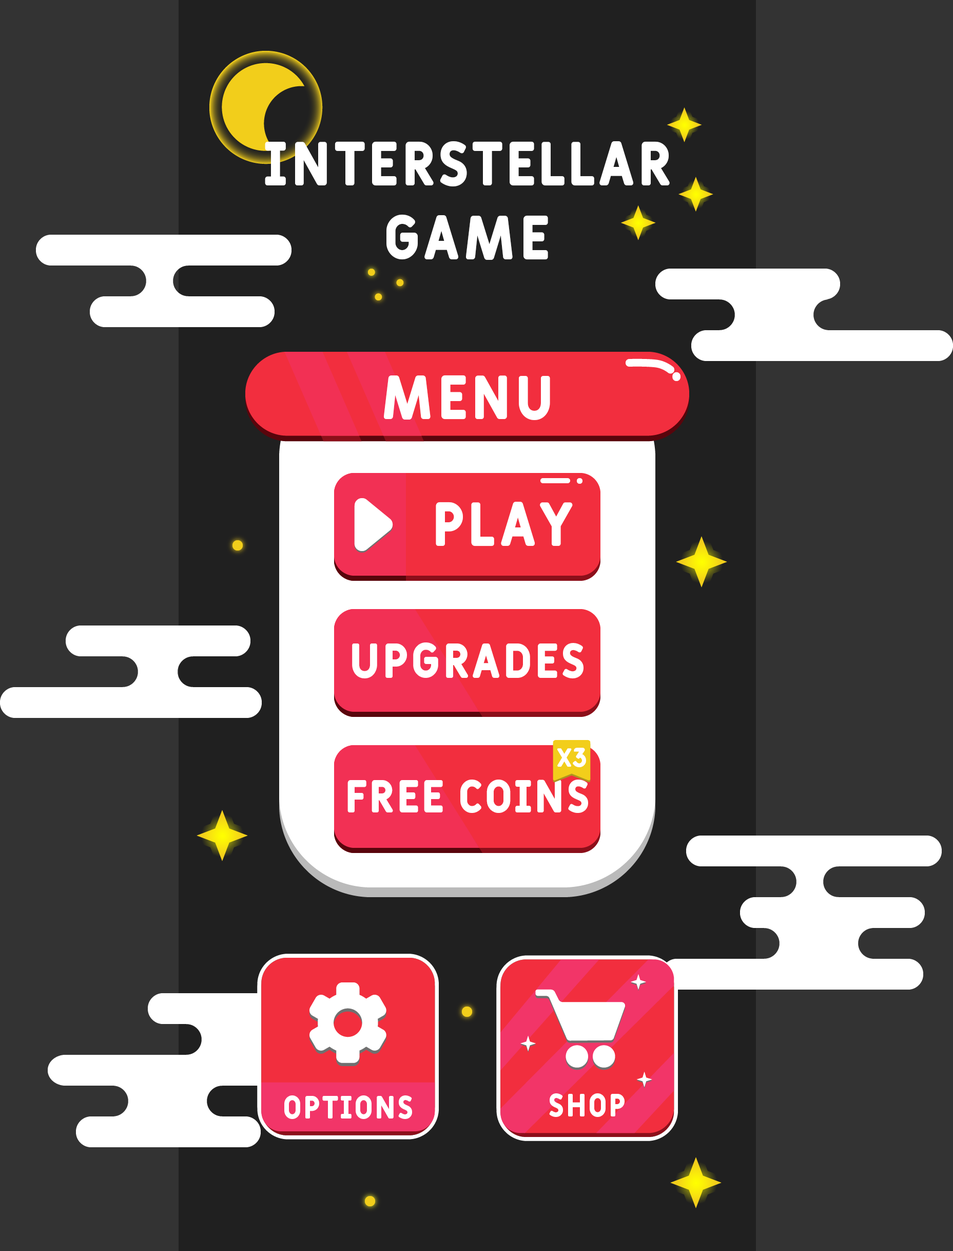
<style>
.page{position:relative;width:953px;height:1251px;background:#333333}
.page>*{position:absolute;margin:0}
.t1{font:61.6px "Fulbo-Premier";color:#ffffff}
.t2{font:61.6px "Fulbo-Argenta";color:#ffffff}
.t3{font:48.8px "Fulbo-Argenta";color:#ffffff}
.t4{font:26.1px "Fulbo-Argenta";color:#ffffff}
.t5{font:46.2px "Fulbo-Argenta";color:#ffffff}
.t6{font:32px "Fulbo-Argenta";color:#ffffff}
</style>
<div class="page">
<p class="t1" style="left:265px;top:141px;width:405px;height:119px;text-align:center">Interstellar<br>game</p>
<p class="t2" style="left:384px;top:375px;width:166px;height:45px">Menu</p>
<p class="t2" style="left:436px;top:502px;width:137px;height:44px">PLAY</p>
<p class="t3" style="left:352px;top:642px;width:232px;height:36px">UPGRADES</p>
<p class="t4" style="left:558px;top:748px;width:28px;height:19px">X3</p>
<p class="t5" style="left:348px;top:779px;width:240px;height:34px">FREE COINS</p>
<p class="t6" style="left:284px;top:1095px;width:128px;height:24px">Options</p>
<p class="t6" style="left:549px;top:1093px;width:76px;height:24px">Shop</p>
</div>
